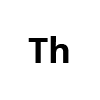
<style>
.page{position:relative;width:100px;height:100px;background:#ffffff}
.page>*{position:absolute;margin:0}
.t1{font:35px "OpenSans-Bold";color:#000000}
</style>
<div class="page">
<p class="t1" style="left:28px;top:36px;width:41px;height:27px">Th</p>
</div>
